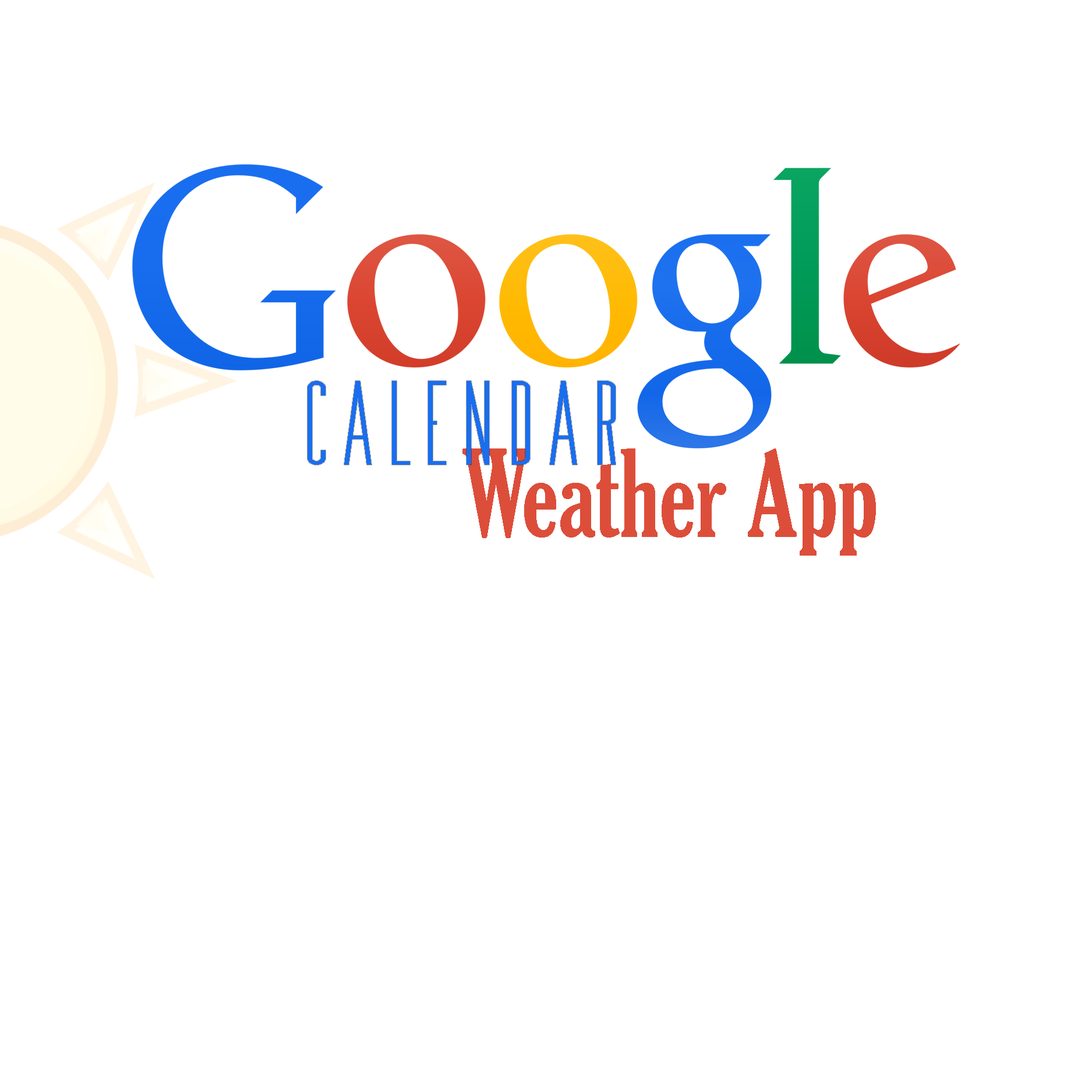
<style>
.page{position:relative;width:1092px;height:1092px;background:#ffffff}
.page>*{position:absolute;margin:0}
.t1{font:116.5px "Munich";letter-spacing:0.1em;color:#196eef;scale:1.25 1}
.t2{font:116.5px "GloucesterMT-ExtraCondensed";color:#dc4d3a}
</style>
<div class="page">
<p class="t1" style="left:308px;top:381px;width:308px;height:84px">Calendar</p>
<p class="t2" style="left:462px;top:448px;width:414px;height:108px">Weather App</p>
</div>
